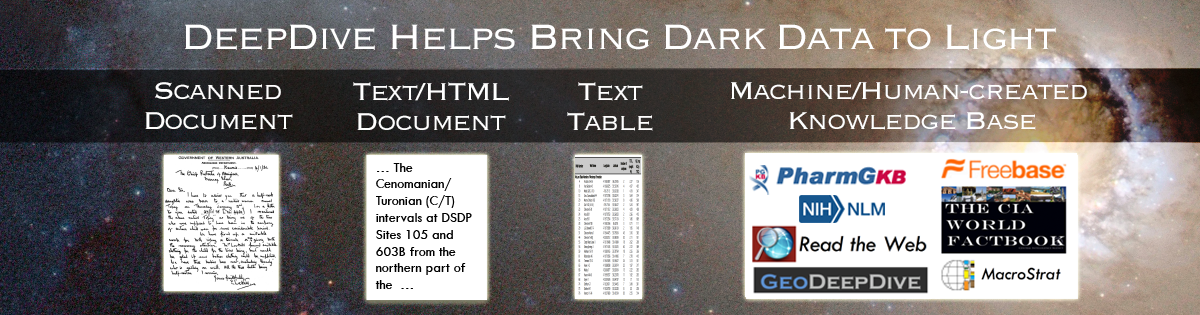
<style>
.page{position:relative;width:1200px;height:315px}
.page>*{position:absolute;margin:0}
.t1{font:45.9px "Copperplate-Light";letter-spacing:-0.05em;color:#ffffff}
.t2{font:32px/30px "Copperplate-Light";letter-spacing:-0.05em;color:#ffffff}
</style>
<div class="page">
<p class="t1" style="left:185px;top:24px;width:871px;height:26px">DeepDive Helps Bring Dark Data to Light</p>
<p class="t2" style="left:145px;top:82px;width:148px;height:48px;text-align:center">Scanned<br>Document</p>
<p class="t2" style="left:353px;top:82px;width:156px;height:49px;text-align:center">Text/HTML<br>Document</p>
<p class="t2" style="left:567px;top:82px;width:86px;height:49px;text-align:center">Text<br>Table</p>
<p class="t2" style="left:731px;top:82px;width:356px;height:48px;text-align:center">Machine/Human-created <br>Knowledge Base</p>
</div>
